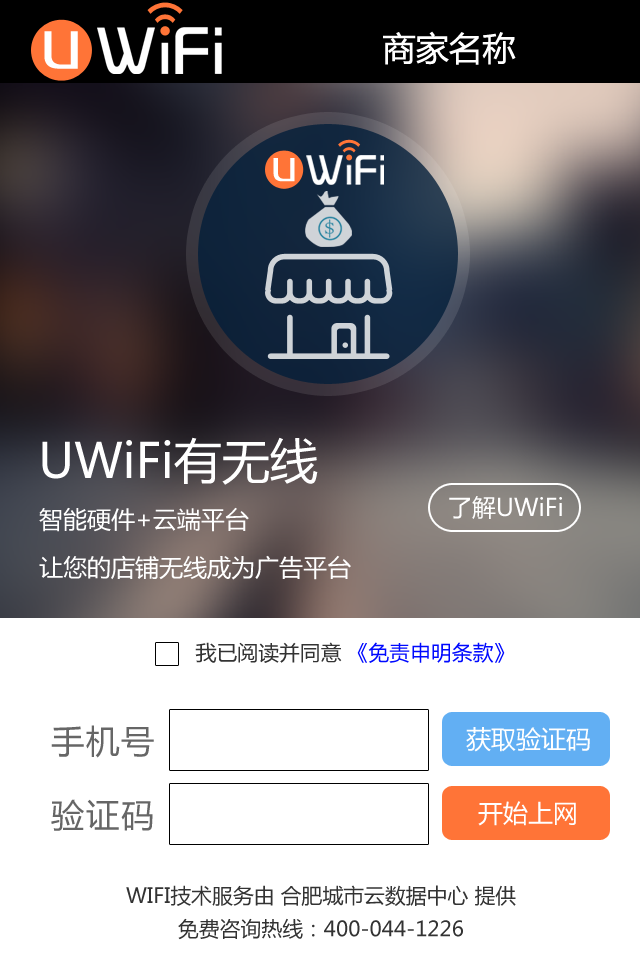
<style>
.page{position:relative;width:640px;height:960px;background:#ffffff}
.page>*{position:absolute;margin:0}
.t1{font:62.5px "FZZZHUNHJW--GB1-0";letter-spacing:0.05em;color:#ffffff}
.t2{font:33.3px "MicrosoftYaHei";color:#ffffff}
.t3{font:48px "MicrosoftYaHei";color:#ffffff}
.t4{font:24px "MicrosoftYaHei";color:#fefefe}
.t5{font:24px/48px "MicrosoftYaHei";color:#ffffff}
.t6{font:20.8px "MicrosoftYaHei";color:#0009ff}
.t7{font:20.8px "MicrosoftYaHei";color:#333333}
.t8{font:33.3px "MicrosoftYaHei";letter-spacing:0.05em;color:#666666}
.t9{font:25px "MicrosoftYaHei";color:#ffffff}
.t10{font:20.8px/33.3px "MicrosoftYaHei";color:#333333}
</style>
<div class="page">
<p class="t1" style="left:44px;top:31px;width:34px;height:38px">u</p>
<p class="t2" style="left:383px;top:31px;width:133px;height:34px">商家名称</p>
<p class="t3" style="left:42px;top:437px;width:276px;height:48px">UWiFi有无线</p>
<p class="t4" style="left:449px;top:496px;width:113px;height:23px">了解UWiFi</p>
<p class="t5" style="left:39px;top:507px;width:312px;height:73px">智能硬件+云端平台<br>让您的店铺无线成为广告平台</p>
<p class="t6" style="left:195px;top:642px;width:310px;height:21px"><span class="t7">我已阅读并同意 </span>《免责申明条款》</p>
<p class="t8" style="left:51px;top:725px;width:103px;height:33px">手机号</p>
<p class="t9" style="left:466px;top:727px;width:124px;height:25px">获取验证码</p>
<p class="t8" style="left:51px;top:799px;width:102px;height:32px">验证码</p>
<p class="t9" style="left:478px;top:801px;width:98px;height:25px">开始上网</p>
<p class="t10" style="left:126px;top:885px;width:390px;height:55px;text-align:center">WIFI技术服务由 合肥城市云数据中心 提供<br>免费咨询热线：400-044-1226</p>
</div>
